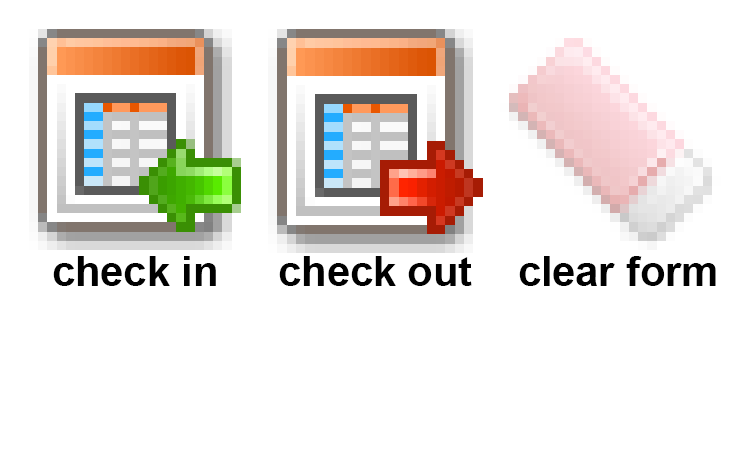
<style>
.page{position:relative;width:750px;height:450px;background:#ffffff}
.page>*{position:absolute;margin:0}
.t1{font:41.5px "Arial-BoldMT";color:#000000}
</style>
<div class="page">
<p class="t1" style="left:53px;top:256px;width:163px;height:30px">check in</p>
<p class="t1" style="left:279px;top:256px;width:193px;height:30px">check out</p>
<p class="t1" style="left:519px;top:256px;width:197px;height:30px">clear form</p>
</div>
